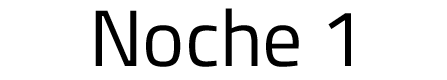
<style>
.page{position:relative;width:447px;height:80px;background:#ffffff}
.page>*{position:absolute;margin:0}
.t1{font:80px "TitilliumWeb-Regular";color:#000000}
</style>
<div class="page">
<p class="t1" style="left:95px;top:8px;width:256px;height:59px">Noche 1</p>
</div>
